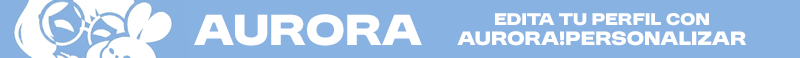
<style>
.page{position:relative;width:800px;height:58px;background:#88b2e2}
.page>*{position:absolute;margin:0}
.t1{font:36px "MODERNIZ";letter-spacing:0.01em;color:#ffffff}
.t2{font:14px/20px "MODERNIZ";letter-spacing:0.01em;color:#ffffff}
.t3{font:16px/20px "MODERNIZ";letter-spacing:0.01em;color:#ffffff}
</style>
<div class="page">
<p class="t1" style="left:194px;top:14px;width:228px;height:32px">Aurora</p>
<p class="t2" style="left:457px;top:13px;width:290px;height:33px;text-align:center">Edita tu perfil con<br><span class="t3">aurora!personalizar</span></p>
</div>
